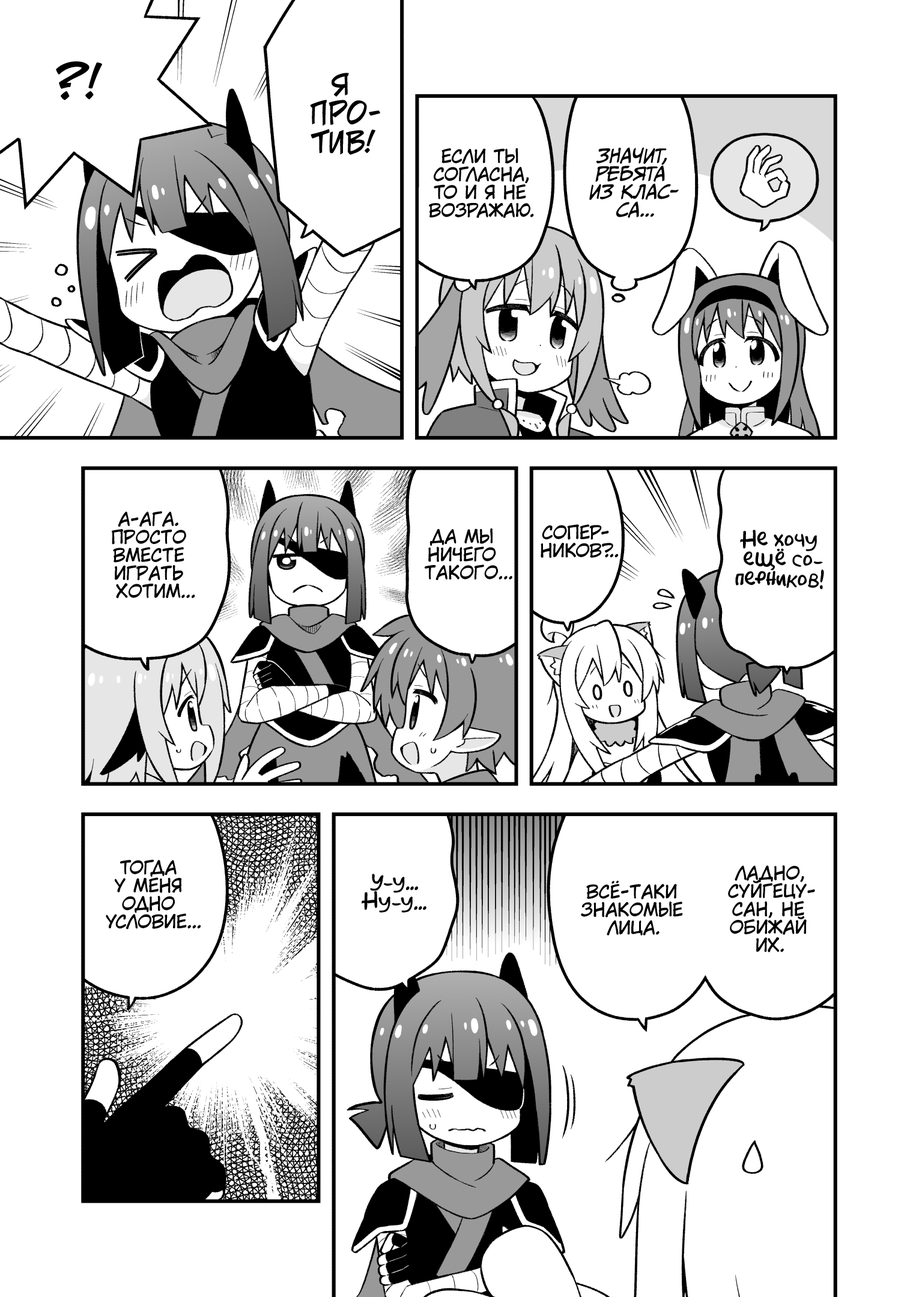
<style>
.page{position:relative;width:919px;height:1297px;background:#ffffff}
.page>*{position:absolute;margin:0}
.t1{font:45.1px "v_CCJeffCampbell";color:#000000;text-transform:uppercase}
.t2{font:28.8px "v_CCJeffCampbell";color:#000000;text-transform:uppercase}
.t3{font:18px "KuraiVoice2";color:#000000;text-transform:uppercase}
.t4{font:18px "CCMeanwhile";color:#000000;text-transform:uppercase;font-style:italic}
.t5{font:19.8px "AkbarPlain";color:#000000}
</style>
<div class="page">
<p class="t1" style="left:56px;top:61px;width:46px;height:39px">?!</p>
<p class="t2" style="left:310px;top:73px;width:70px;height:82px;text-align:center">Я<br>про-<br>тив!</p>
<p class="t3" style="left:429px;top:148px;width:105px;height:70px;text-align:center">Если ты<br>согласна,<br>то и я не<br>возражаю.</p>
<p class="t4" style="left:589px;top:147px;width:90px;height:71px;text-align:center">Значит,<br>ребята<br>из клас-<br>са...</p>
<p class="t3" style="left:112px;top:511px;width:83px;height:88px;text-align:center">А-ага.<br>просто<br>вместе<br>играть<br>хотим...</p>
<p class="t3" style="left:425px;top:529px;width:87px;height:51px;text-align:center">Да мы<br>ничего<br>такого...</p>
<p class="t3" style="left:541px;top:524px;width:77px;height:34px;text-align:center">Сопер-<br>ников?..</p>
<p class="t5" style="left:735px;top:530px;width:89px;height:60px;text-align:center">Не хочу<br>ещё со-<br>перников!</p>
<p class="t3" style="left:106px;top:860px;width:95px;height:70px;text-align:center">Тогда<br>у меня<br>одно<br>условие...</p>
<p class="t3" style="left:728px;top:866px;width:87px;height:87px;text-align:center">Ладно,<br>Суйгецу-<br>сан, не<br>обижай<br>их.</p>
<p class="t5" style="left:362px;top:874px;width:64px;height:39px;text-align:center">У-у...<br>Ну-у...</p>
<p class="t3" style="left:581px;top:881px;width:102px;height:55px;text-align:center">Всё-таки<br>знакомые<br>лица.</p>
</div>
